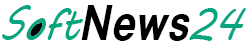
<style>
.page{position:relative;width:250px;height:45px;background:#ffffff}
.page>*{position:absolute;margin:0}
.t1{font:45.5px "MVBoli";color:#07a681;scale:0.86 1}
.t2{font:54.6px "Vrinda-Bold";color:#000000;scale:0.86 1}
</style>
<div class="page">
<p class="t1" style="left:2px;top:5px;width:244px;height:36px">Soft<span class="t2">News</span>24</p>
</div>
